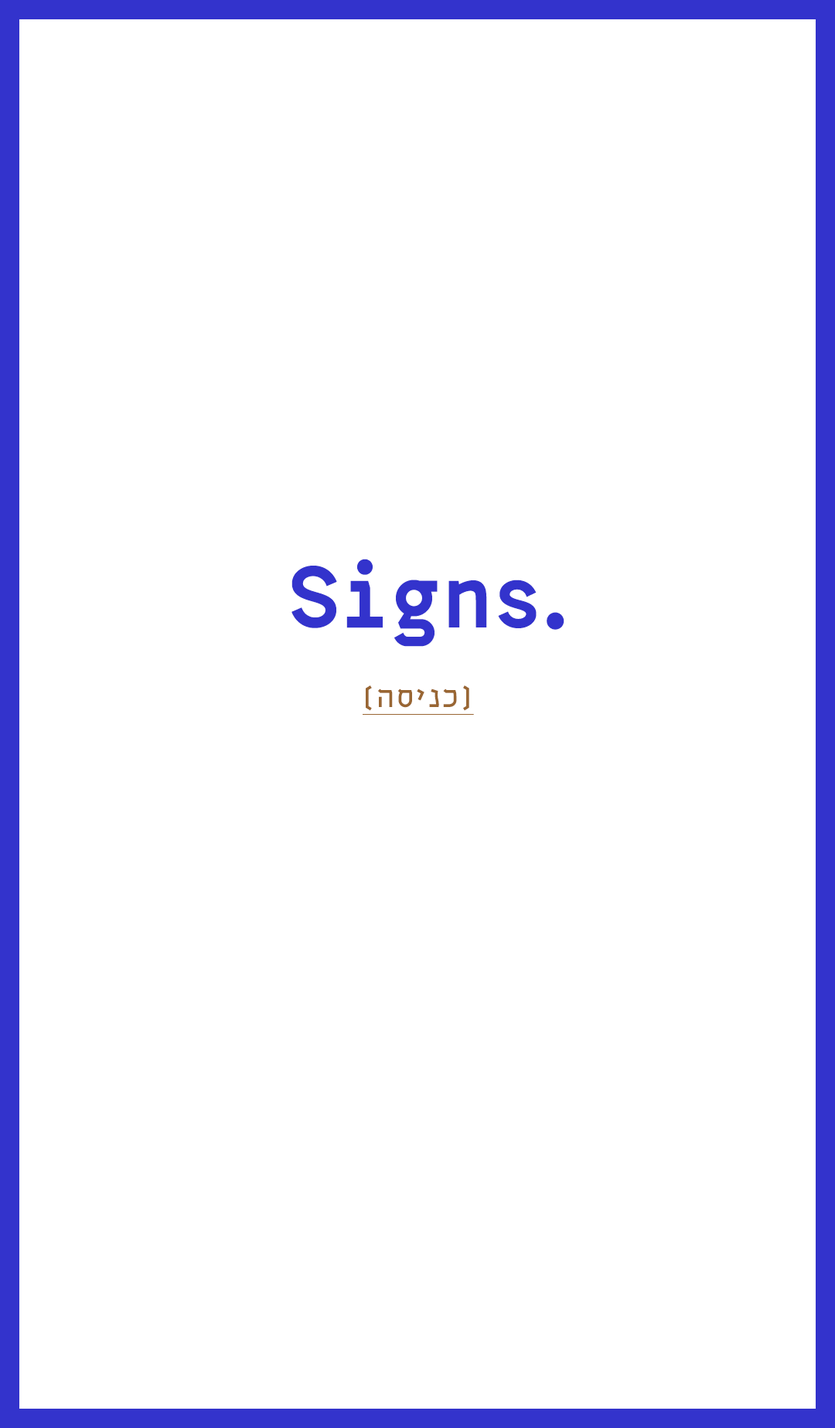
<style>
.page{position:relative;width:835px;height:1428px;background:#ffffff}
.page>*{position:absolute;margin:0}
.t1{font:92.8px "MaccabiBlock-Black";color:#3333cc}
.t2{font:69.6px "MaccabiBlock-Black";color:#3333cc}
.t3{font:30.9px "MaccabiBlock";letter-spacing:0.04em;color:#996633;text-decoration:underline}
</style>
<div class="page">
<p class="t1" style="left:291px;top:559px;width:273px;height:88px">Signs<span class="t2">.</span></p>
<p class="t3" style="left:363px;top:686px;width:111px;height:29px">[הסינכ]</p>
</div>
